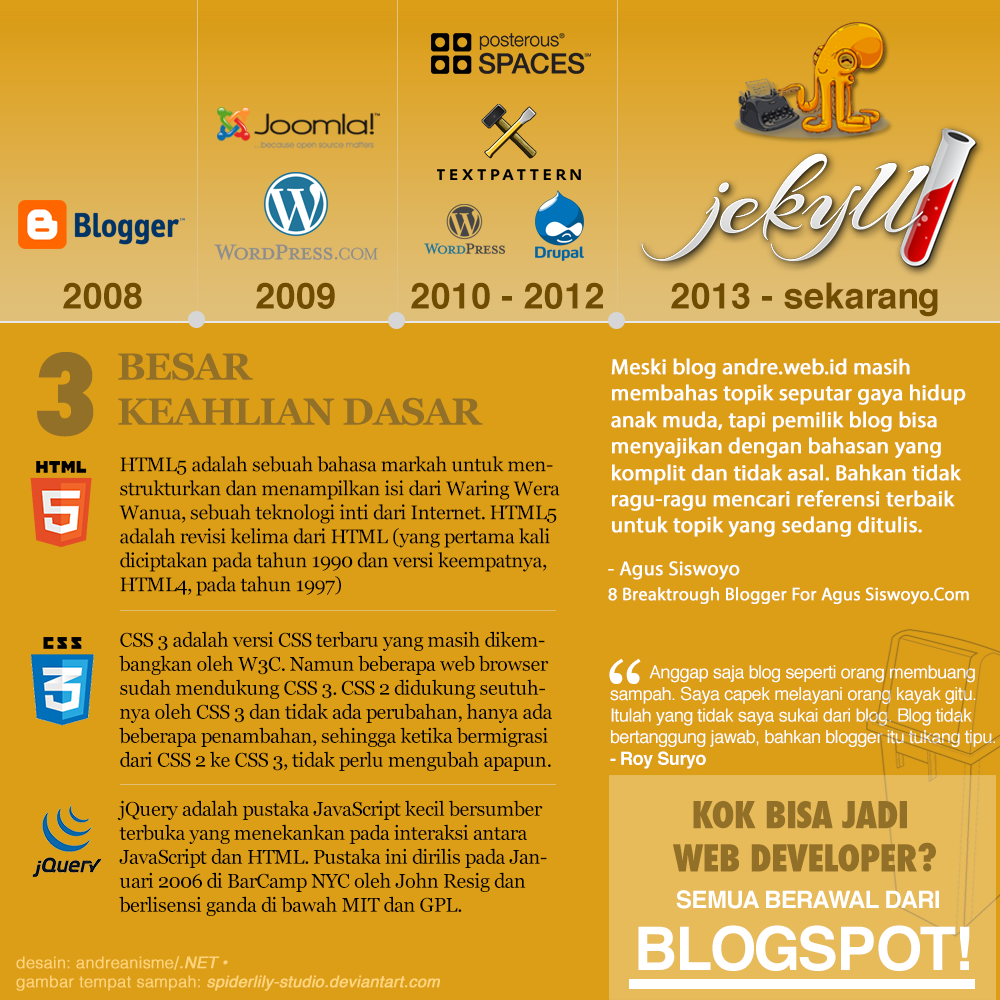
<style>
.page{position:relative;width:1000px;height:1000px;background:#dd9e17}
.page>*{position:absolute;margin:0}
.t1{font:36px "Helvetica-Bold";letter-spacing:-0.025em;color:#704c00}
.t2{font:111.9px "Futura-CondensedExtraBold";letter-spacing:-0.025em;color:#937027}
.t3{font:37.6px "Georgia-Bold";letter-spacing:-0.025em;color:#937027}
.t4{font:22px "MyriadPro-Regular";color:#ffffff;font-weight:bold}
.t5{font:20px "Georgia";letter-spacing:-0.025em;color:#000000}
.t6{font:20px "MyriadPro-Regular";color:#ffffff;font-weight:bold}
.t7{font:18px "MyriadPro-Regular";color:#ffffff;font-weight:bold}
.t8{font:96px "Georgia";letter-spacing:-0.025em;color:#ffffff}
.t9{font:18px "Helvetica";letter-spacing:-0.025em;color:#ffffff}
.t10{font:18px "Futura-CondensedMedium";letter-spacing:-0.025em;color:#ffffff}
.t11{font:18px "Helvetica-Bold";letter-spacing:-0.025em;color:#ffffff}
.t12{font:36px "Futura-CondensedExtraBold";letter-spacing:-0.025em;color:#937027}
.t13{font:12px "Helvetica-Bold";letter-spacing:-0.025em;color:#ffffff}
.t14{font:60px "Helvetica-Bold";letter-spacing:-0.025em;color:#ffffff}
.t15{font:16px "Helvetica-Oblique";color:#ffd57c;font-weight:bold}
.t16{font:16px "Helvetica-Light";color:#ffd57c;font-weight:bold}
</style>
<div class="page">
<p class="t1" style="left:63px;top:282px;width:79px;height:27px">2008</p>
<p class="t1" style="left:256px;top:282px;width:79px;height:27px">2009</p>
<p class="t1" style="left:411px;top:282px;width:192px;height:27px">2010 - 2012</p>
<p class="t1" style="left:671px;top:282px;width:267px;height:35px">2013 - sekarang</p>
<p class="t2" style="left:37px;top:352px;width:57px;height:85px">3</p>
<p class="t3" style="left:118px;top:352px;width:365px;height:74px">BESAR <br>KEAHLIAN DASAR</p>
<p class="t4" style="left:611px;top:358px;width:355px;height:179px">Meski blog andre.web.id masih membahas topik seputar gaya hidup anak muda, tapi pemilik blog bisa menyajikan dengan bahasan yang komplit dan tidak asal. Bahkan tidak ragu-ragu mencari referensi terbaik untuk topik yang sedang ditulis.</p>
<p class="t5" style="left:119px;top:456px;width:441px;height:140px">HTML5 adalah sebuah bahasa markah untuk menstrukturkan dan menampilkan isi dari Waring Wera Wanua, sebuah teknologi inti dari Internet. HTML5 adalah revisi kelima dari HTML (yang pertama kali diciptakan pada tahun 1990 dan versi keempatnya, HTML4, pada tahun 1997)</p>
<p class="t6" style="left:608px;top:561px;width:132px;height:19px">- Agus Siswoyo</p>
<p class="t7" style="left:608px;top:587px;width:361px;height:18px">8 Breaktrough Blogger For Agus Siswoyo.Com</p>
<p class="t5" style="left:119px;top:631px;width:433px;height:140px">CSS 3 adalah versi CSS terbaru yang masih dikembangkan oleh W3C. Namun beberapa web browser sudah mendukung CSS 3. CSS 2 didukung seutuhnya oleh CSS 3 dan tidak ada perubahan, hanya ada beberapa penambahan, sehingga ketika bermigrasi dari CSS 2 ke CSS 3, tidak perlu mengubah apapun.</p>
<p class="t8" style="left:609px;top:658px;width:32px;height:26px">“</p>
<p class="t9" style="left:610px;top:665px;width:385px;height:104px"><span class="t10">           </span>Anggap saja blog seperti orang membuang sampah. Saya capek melayani orang kayak gitu. Itulah yang tidak saya sukai dari blog. Blog tidak bertanggung jawab, bahkan blogger itu tukang tipu. <span class="t11">- Roy Suryo</span></p>
<p class="t5" style="left:117px;top:800px;width:430px;height:116px">jQuery adalah pustaka JavaScript kecil bersumber terbuka yang menekankan pada interaksi antara JavaScript dan HTML. Pustaka ini dirilis pada Januari 2006 di BarCamp NYC oleh John Resig dan berlisensi ganda di bawah MIT dan GPL.</p>
<p class="t12" style="left:673px;top:801px;width:263px;height:71px;text-align:center">KOK BISA JADI <br>WEB DEVELOPER?</p>
<p class="t13" style="left:676px;top:890px;width:263px;height:19px">SEMUA BERAWAL DARI</p>
<p class="t14" style="left:638px;top:925px;width:332px;height:46px">BLOGSPOT!</p>
<p class="t15" style="left:16px;top:956px;width:424px;height:35px"><span class="t16">desain: andreanisme/</span>.NET •<br><span class="t16">gambar tempat sampah:</span> spiderlily-studio.deviantart.com</p>
</div>
